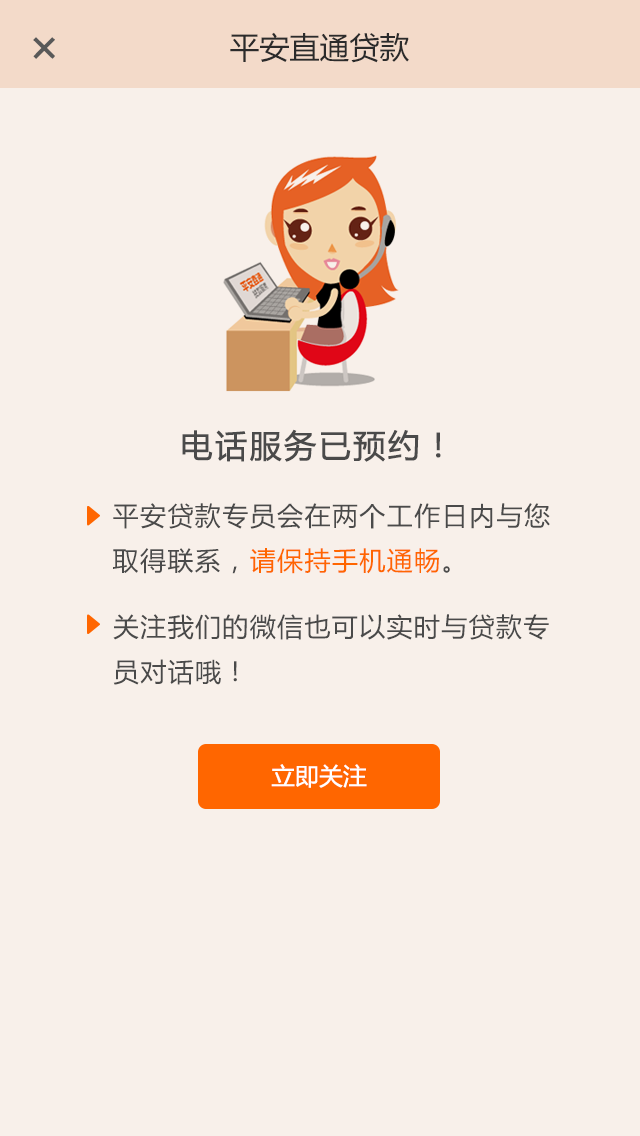
<style>
.page{position:relative;width:640px;height:1136px;background:#f8f0ea}
.page>*{position:absolute;margin:0}
.t1{font:54px "MicrosoftYaHei";color:#595959}
.t2{font:30px "MicrosoftYaHei";color:#2b2b2b}
.t3{font:32px "MicrosoftYaHei";letter-spacing:0.05em;color:#4a4a4a;font-weight:bold}
.t4{font:26px/44.8px "MicrosoftYaHei";letter-spacing:0.05em;color:#4a4a4a}
.t5{font:26px/44.8px "MicrosoftYaHei";letter-spacing:0.05em;color:#ff6600}
.t6{font:25.9px/44.9px "MicrosoftYaHei";letter-spacing:0.05em;color:#4a4a4a}
.t7{font:24px "MicrosoftYaHei";color:#ffffff}
</style>
<div class="page">
<p class="t1" style="left:33px;top:37px;width:22px;height:22px;rotate:45deg">+</p>
<p class="t2" style="left:230px;top:32px;width:179px;height:31px">平安直通贷款</p>
<p class="t3" style="left:182px;top:429px;width:259px;height:33px">电话服务已预约！</p>
<p class="t4" style="left:113px;top:503px;width:437px;height:71px">平安贷款专员会在两个工作日内与您<br>取得联系，<span class="t5">请保持手机通畅</span>。</p>
<p class="t6" style="left:113px;top:614px;width:436px;height:71px">关注我们的微信也可以实时与贷款专<br>员对话哦！</p>
<p class="t7" style="left:271px;top:764px;width:96px;height:24px">立即关注</p>
</div>
